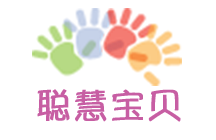
<style>
.page{position:relative;width:216px;height:140px;background:#ffffff}
.page>*{position:absolute;margin:0}
.t1{font:36px "YuppySC-Regular";color:#c75ea3;font-weight:bold}
</style>
<div class="page">
<p class="t1" style="left:37px;top:89px;width:144px;height:33px">聪慧宝贝</p>
</div>
